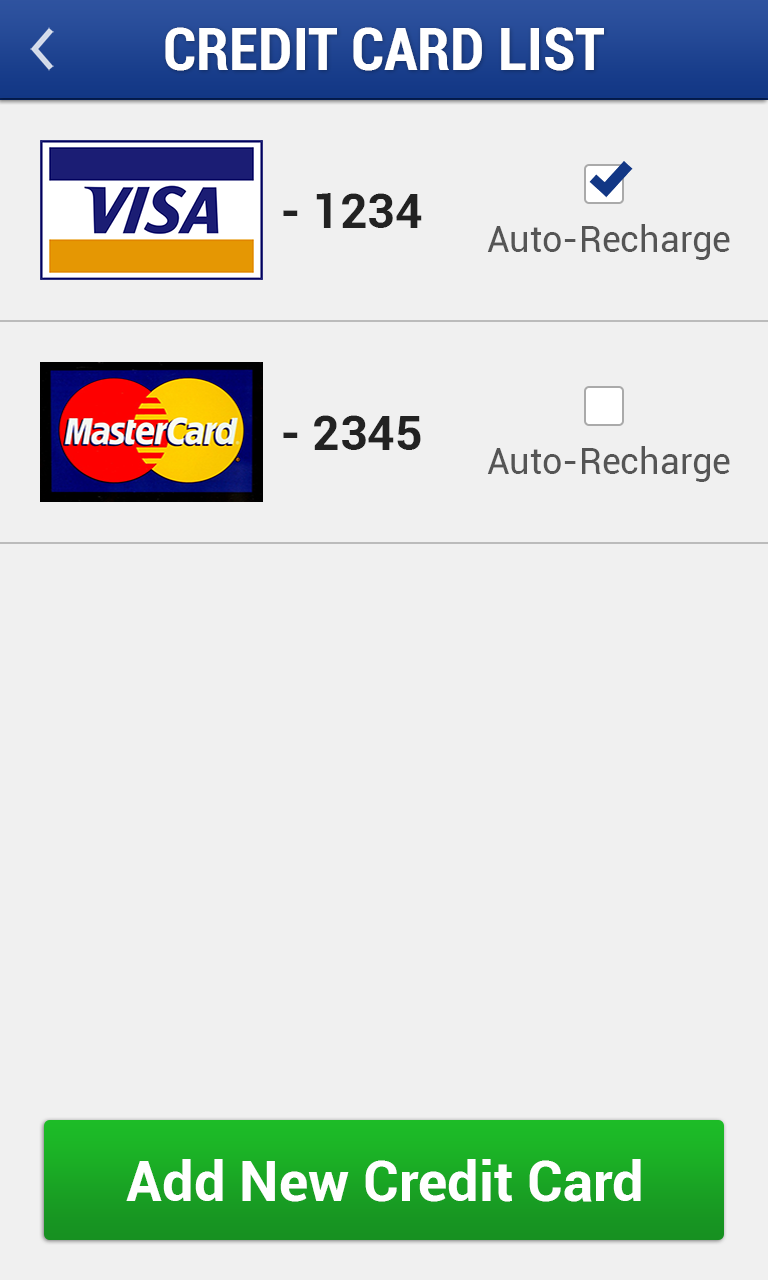
<style>
.page{position:relative;width:768px;height:1280px;background:#f0f0f0}
.page>*{position:absolute;margin:0}
.t1{font:60px "Roboto-BoldCondensed";color:#ffffff}
.t2{font:48px "Roboto-Bold";color:#222222}
.t3{font:36px "Roboto-Regular";color:#555555}
.t4{font:56px "Roboto-Bold";color:#ffffff}
</style>
<div class="page">
<p class="t1" style="left:165px;top:27px;width:439px;height:44px">CREDIT CARD LIST</p>
<p class="t2" style="left:283px;top:193px;width:139px;height:35px">- 1234</p>
<p class="t3" style="left:487px;top:224px;width:243px;height:36px">Auto-Recharge</p>
<p class="t2" style="left:283px;top:415px;width:138px;height:35px">- 2345</p>
<p class="t3" style="left:487px;top:446px;width:243px;height:36px">Auto-Recharge</p>
<p class="t4" style="left:126px;top:1159px;width:515px;height:43px">Add New Credit Card</p>
</div>
